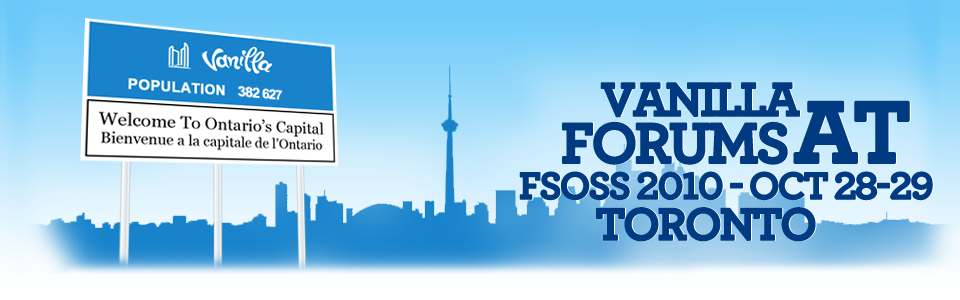
<style>
.page{position:relative;width:960px;height:300px}
.page>*{position:absolute;margin:0}
.t1{font:50px "Archer-Bold";letter-spacing:-0.075em;color:#003b82;text-transform:uppercase;font-weight:bold}
.t2{font:92.3px "Archer-Bold";letter-spacing:-0.075em;color:#003b82;text-transform:uppercase;font-weight:bold}
.t3{font:60px "Archer-Bold";letter-spacing:-0.075em;color:#003b82;text-transform:uppercase;font-weight:bold}
.t4{font:40px "Archer-Bold";letter-spacing:-0.075em;color:#003b82;text-transform:uppercase;font-weight:bold}
.t5{font:48px "Archer-Bold";letter-spacing:-0.075em;color:#003b82;text-transform:uppercase;font-weight:bold}
</style>
<div class="page">
<p class="t1" style="left:600px;top:82px;width:200px;height:36px">Vanilla</p>
<p class="t2" style="left:793px;top:100px;width:117px;height:64px">at</p>
<p class="t3" style="left:562px;top:121px;width:226px;height:44px">forums</p>
<p class="t4" style="left:519px;top:171px;width:414px;height:30px">fsoss 2010 - oct 28-29</p>
<p class="t5" style="left:596px;top:207px;width:220px;height:35px">Toronto</p>
</div>
